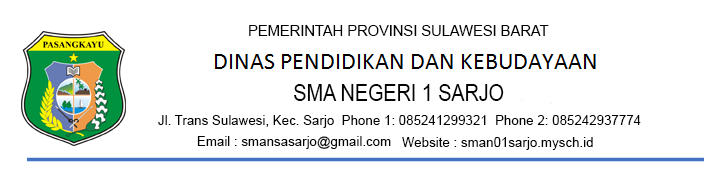
<style>
.page{position:relative;width:721px;height:179px;background:#ffffff}
.page>*{position:absolute;margin:0}
.t1{font:14.7px "ArialMT";color:#020202}
.t2{font:22.8px "ArialMT";color:#020202;scale:0.87 1}
.t3{font:13.3px "ArialMT";color:#020202}
</style>
<div class="page">
<p class="t1" style="left:249px;top:25px;width:300px;height:11px">PEMERINTAH PROVINSI SULAWESI BARAT</p>
<p class="t2" style="left:294px;top:84px;width:210px;height:17px">SMA NEGERI 1 SARJO</p>
<p class="t3" style="left:158px;top:115px;width:483px;height:13px">Jl. Trans Sulawesi, Kec. Sarjo  Phone 1: 085241299321  Phone 2: 085242937774</p>
<p class="t3" style="left:197px;top:136px;width:194px;height:13px">Email : smansasarjo@gmail.com</p>
<p class="t3" style="left:402px;top:137px;width:191px;height:13px">Website : sman01sarjo.mysch.id</p>
</div>
